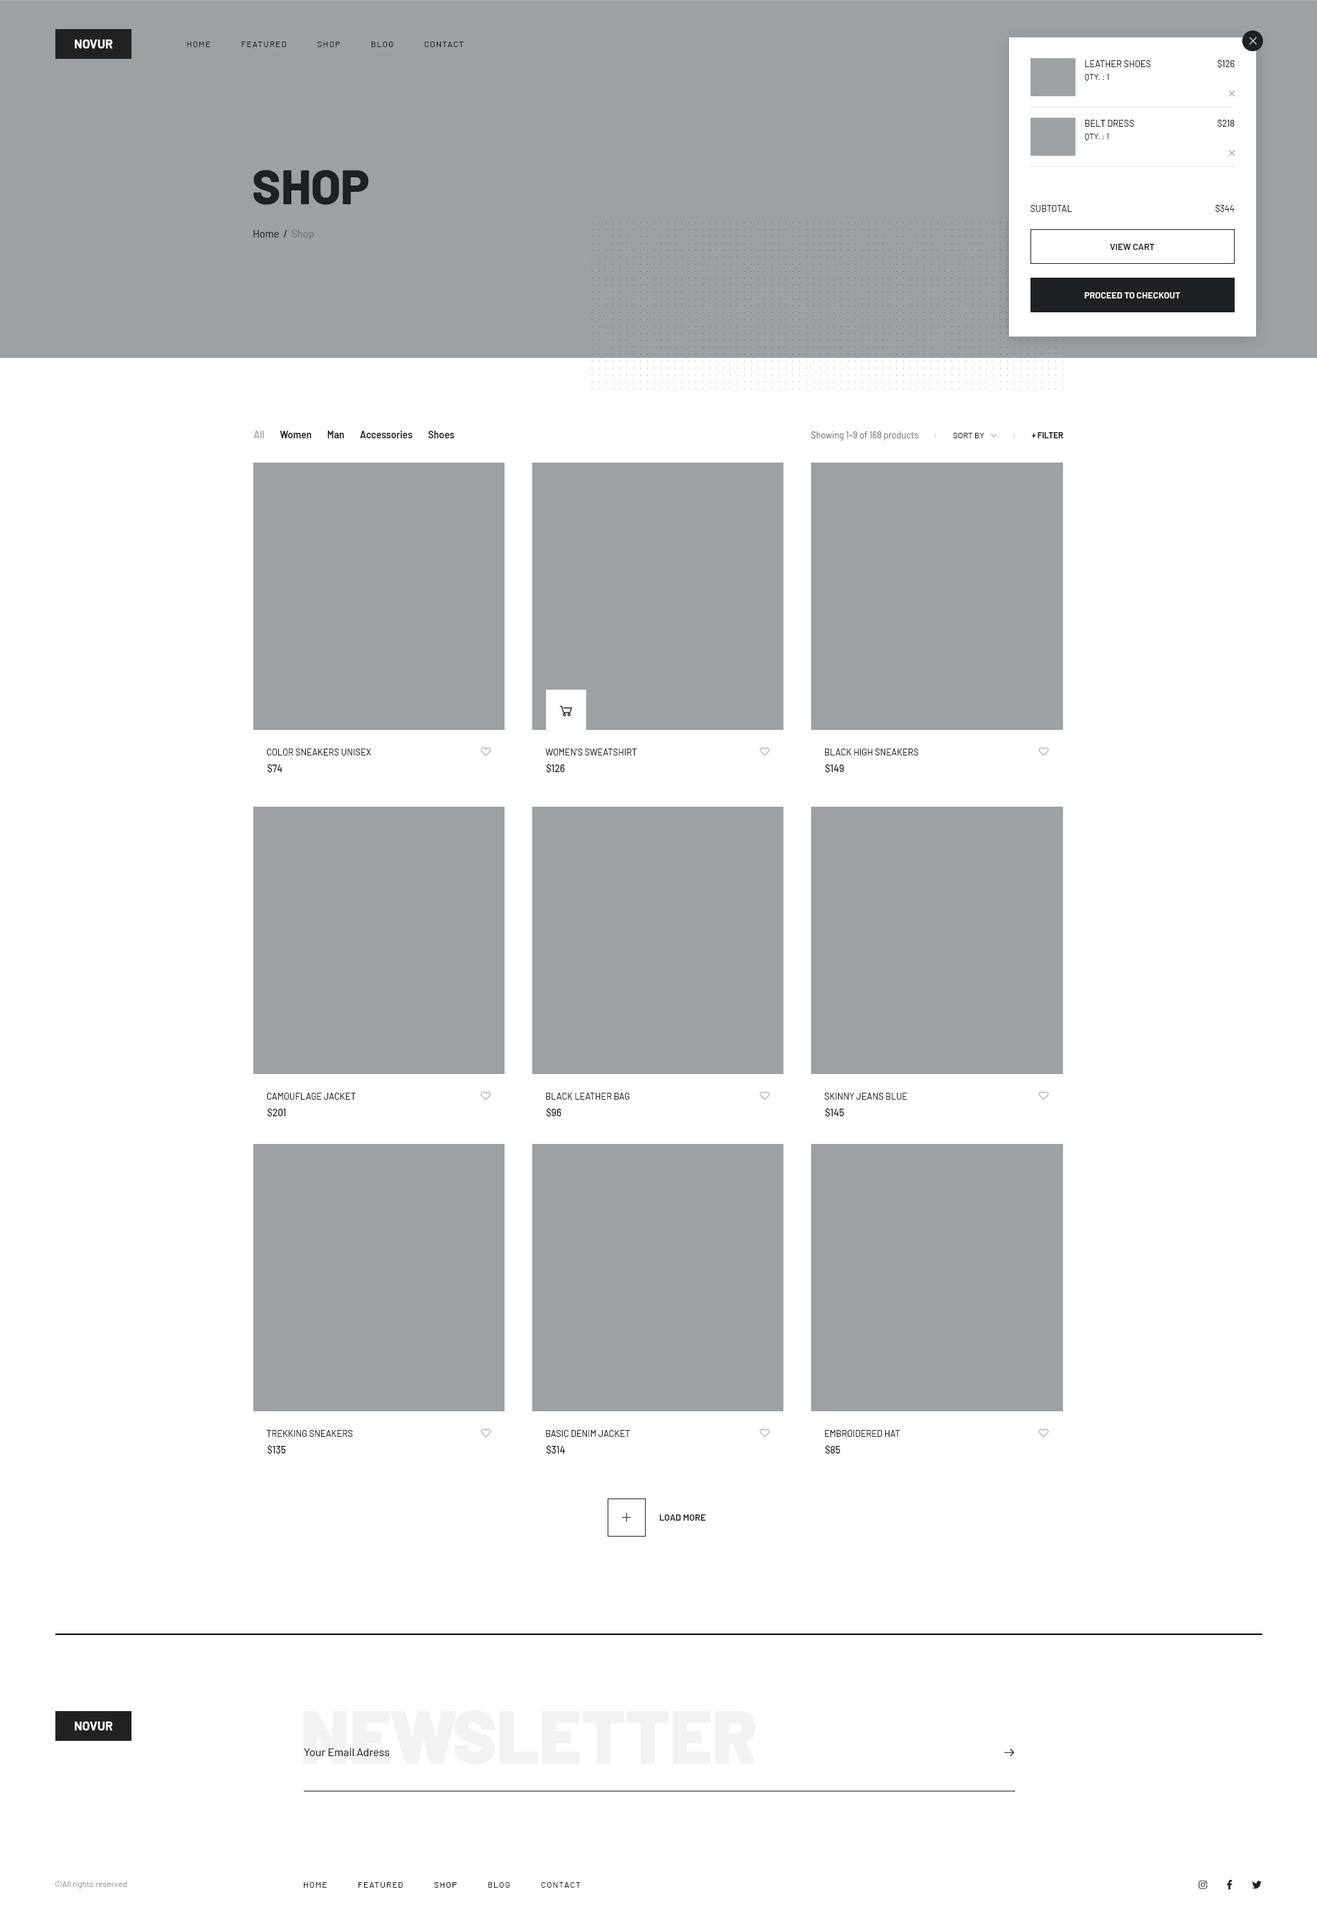
<style>
.page{position:relative;width:1317px;height:1932px;background:#ffffff}
.page>*{position:absolute;margin:0}
.t1{font:12.5px "Barlow-Bold";color:#fefefe;text-transform:uppercase}
.t2{font:8.3px "Barlow-Regular";letter-spacing:0.1em;color:#1e2124;text-transform:uppercase}
.t3{font:9px "Barlow-Regular";color:#1e2124;text-transform:uppercase}
.t4{font:9px "Barlow-Regular";color:#1e2124}
.t5{font:8.3px "Barlow-Regular";color:#1e2124;text-transform:uppercase}
.t6{font:48.5px "Barlow-ExtraBold";color:#1e2124;text-transform:uppercase}
.t7{font:10.4px "Barlow-Regular";color:#1e2124}
.t8{font:10.4px "Barlow-Regular";color:#6e7071}
.t9{font:9px "Barlow-SemiBold";color:#1e2124;text-transform:uppercase}
.t10{font:9px "Barlow-SemiBold";color:#ffffff;text-transform:uppercase}
.t11{font:9.7px "Barlow-SemiBold";color:#1e2124}
.t12{font:9.7px "Barlow-SemiBold";color:#aaabab}
.t13{font:9px "Barlow-Regular";color:#6e7071}
.t14{font:8.3px "Barlow-Bold";color:#1e2124;text-transform:uppercase}
.t15{font:9.7px "Barlow-Medium";color:#1e2124}
.t16{font:74.1px "Barlow-Black";color:#f2f2f2}
.t17{font:11.1px "Barlow-Regular";color:#1e2124}
.t18{font:8.3px "Barlow-Regular";color:#9e9d9d}
</style>
<div class="page">
<p class="t1" style="left:75px;top:39px;width:38px;height:9px">novur</p>
<p class="t2" style="left:187px;top:42px;width:277px;height:5px">Home            Featured            Shop            Blog            Contact</p>
<p class="t3" style="left:1086px;top:60px;width:65px;height:7px">Leather Shoes</p>
<p class="t4" style="left:1218px;top:60px;width:17px;height:8px">$126</p>
<p class="t5" style="left:1085px;top:74px;width:24px;height:7px">Qty. : 1</p>
<p class="t3" style="left:1086px;top:120px;width:49px;height:7px">Belt Dress</p>
<p class="t4" style="left:1218px;top:119px;width:17px;height:8px">$218</p>
<p class="t5" style="left:1085px;top:134px;width:24px;height:7px">Qty. : 1</p>
<p class="t6" style="left:253px;top:170px;width:116px;height:35px">Shop</p>
<p class="t3" style="left:1031px;top:205px;width:41px;height:7px">Subtotal</p>
<p class="t4" style="left:1216px;top:204px;width:19px;height:9px">$344</p>
<p class="t7" style="left:253px;top:230px;width:61px;height:10px">Home  /<span class="t8">  Shop</span></p>
<p class="t9" style="left:1110px;top:244px;width:45px;height:6px">View Cart</p>
<p class="t10" style="left:1085px;top:292px;width:96px;height:6px">Proceed to Checkout</p>
<p class="t11" style="left:253px;top:431px;width:202px;height:7px"><span class="t12">All</span>        Women        Man        Accessories        Shoes</p>
<p class="t13" style="left:811px;top:431px;width:108px;height:9px">Showing 1–9 of 168 products</p>
<p class="t5" style="left:953px;top:433px;width:31px;height:5px">Sort by</p>
<p class="t14" style="left:1032px;top:432px;width:31px;height:6px">+ Filter</p>
<p class="t3" style="left:267px;top:748px;width:104px;height:7px">Color Sneakers Unisex</p>
<p class="t3" style="left:546px;top:748px;width:91px;height:7px">Women's Sweatshirt</p>
<p class="t3" style="left:825px;top:748px;width:94px;height:7px">Black High Sneakers</p>
<p class="t15" style="left:267px;top:764px;width:15px;height:9px">$74</p>
<p class="t15" style="left:546px;top:764px;width:19px;height:9px">$126</p>
<p class="t15" style="left:825px;top:764px;width:20px;height:9px">$149</p>
<p class="t3" style="left:267px;top:1092px;width:89px;height:7px">Camouflage Jacket</p>
<p class="t3" style="left:546px;top:1092px;width:84px;height:7px">Black Leather Bag</p>
<p class="t3" style="left:825px;top:1092px;width:83px;height:7px">Skinny Jeans Blue</p>
<p class="t15" style="left:267px;top:1108px;width:19px;height:9px">$201</p>
<p class="t15" style="left:546px;top:1108px;width:15px;height:9px">$96</p>
<p class="t15" style="left:825px;top:1108px;width:20px;height:9px">$145</p>
<p class="t3" style="left:267px;top:1430px;width:86px;height:7px">Trekking Sneakers</p>
<p class="t3" style="left:546px;top:1430px;width:85px;height:7px">Basic Denim Jacket</p>
<p class="t3" style="left:825px;top:1430px;width:76px;height:7px">Embroidered Hat</p>
<p class="t15" style="left:267px;top:1445px;width:19px;height:9px">$135</p>
<p class="t15" style="left:546px;top:1445px;width:20px;height:9px">$314</p>
<p class="t15" style="left:825px;top:1445px;width:15px;height:9px">$85</p>
<p class="t9" style="left:660px;top:1514px;width:46px;height:6px">Load More</p>
<p class="t16" style="left:303px;top:1710px;width:453px;height:54px">NEWSLETTER</p>
<p class="t1" style="left:75px;top:1721px;width:38px;height:9px">Novur</p>
<p class="t17" style="left:304px;top:1748px;width:86px;height:8px">Your Email Adress</p>
<p class="t18" style="left:55px;top:1880px;width:72px;height:8px">©All rights reserved</p>
<p class="t2" style="left:304px;top:1882px;width:277px;height:5px">Home            Featured            Shop            Blog            Contact</p>
</div>
